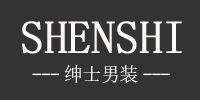
<style>
.page{position:relative;width:200px;height:100px;background:#333333}
.page>*{position:absolute;margin:0}
.t1{font:46px "SimSun";letter-spacing:-0.01em;color:#fdf7f7;font-weight:bold}
.t2{font:19px "NSimSun";letter-spacing:-0.025em;color:#fefefe;text-transform:uppercase}
.t3{font:19px "MS-PGothic";letter-spacing:-0.025em;color:#fefefe}
</style>
<div class="page">
<p class="t1" style="left:22px;top:21px;width:160px;height:33px">SHENSHI</p>
<p class="t2" style="left:32px;top:65px;width:138px;height:18px"><span class="t3">---</span>绅士男装<span class="t3">---</span></p>
</div>
